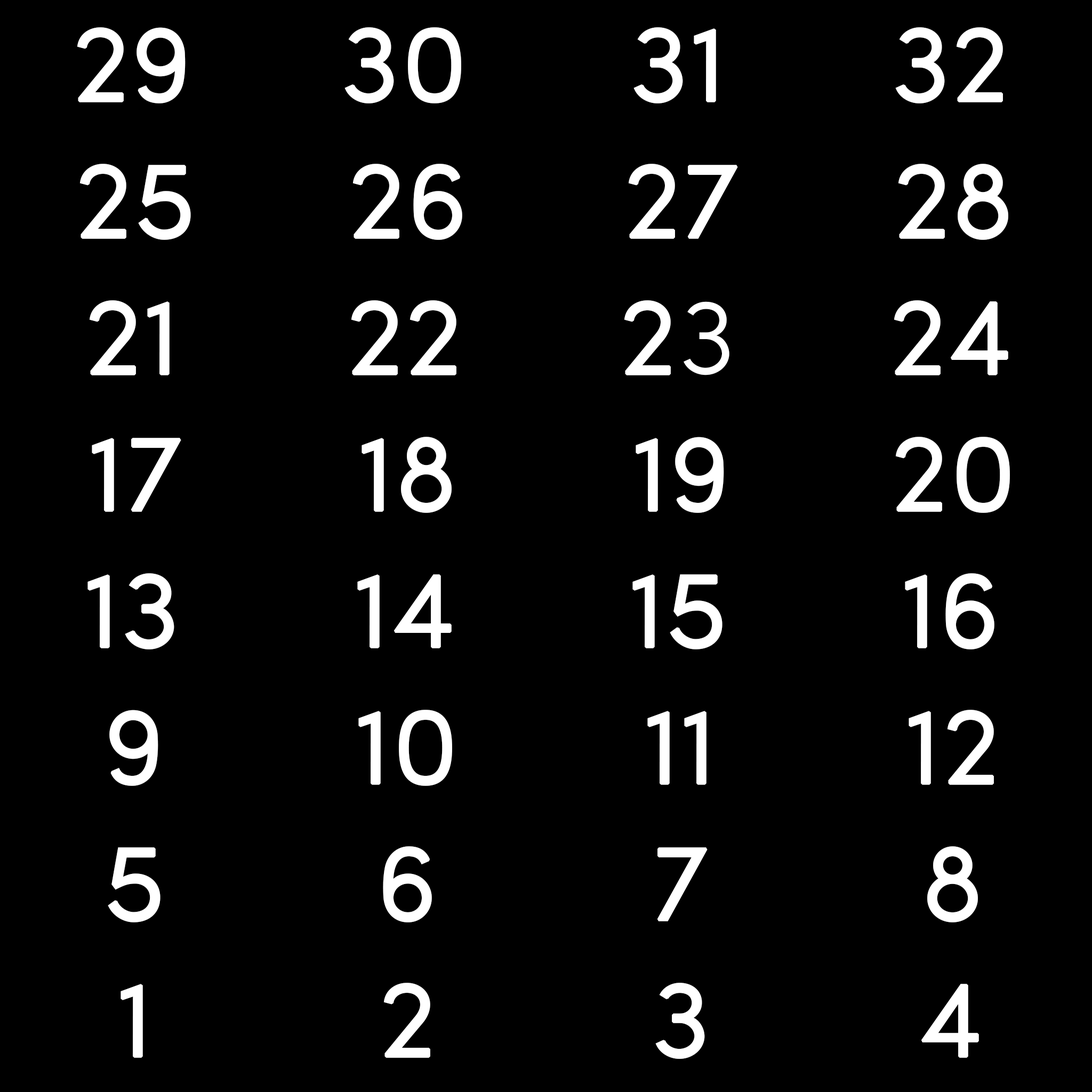
<style>
.page{position:relative;width:1092px;height:1092px;background:#000000}
.page>*{position:absolute;margin:0}
.t1{font:106.6px "SofiaProLight";color:#ffffff;font-weight:bold}
</style>
<div class="page">
<p class="t1" style="left:77px;top:27px;width:109px;height:76px">29</p>
<p class="t1" style="left:344px;top:27px;width:117px;height:76px">30</p>
<p class="t1" style="left:633px;top:27px;width:83px;height:76px">31</p>
<p class="t1" style="left:895px;top:27px;width:108px;height:76px">32</p>
<p class="t1" style="left:79px;top:164px;width:112px;height:76px">25</p>
<p class="t1" style="left:352px;top:164px;width:110px;height:76px">26</p>
<p class="t1" style="left:628px;top:164px;width:110px;height:75px">27</p>
<p class="t1" style="left:898px;top:164px;width:110px;height:76px">28</p>
<p class="t1" style="left:89px;top:300px;width:81px;height:75px">21</p>
<p class="t1" style="left:351px;top:300px;width:105px;height:75px">22</p>
<p class="t1" style="left:624px;top:300px;width:105px;height:75px">23</p>
<p class="t1" style="left:894px;top:300px;width:114px;height:75px">24</p>
<p class="t1" style="left:92px;top:438px;width:89px;height:74px">17</p>
<p class="t1" style="left:362px;top:437px;width:90px;height:76px">18</p>
<p class="t1" style="left:636px;top:437px;width:88px;height:76px">19</p>
<p class="t1" style="left:895px;top:437px;width:115px;height:76px">20</p>
<p class="t1" style="left:87px;top:573px;width:87px;height:76px">13</p>
<p class="t1" style="left:357px;top:574px;width:95px;height:74px">14</p>
<p class="t1" style="left:632px;top:574px;width:90px;height:75px">15</p>
<p class="t1" style="left:905px;top:573px;width:89px;height:76px">16</p>
<p class="t1" style="left:109px;top:710px;width:49px;height:76px">9</p>
<p class="t1" style="left:358px;top:710px;width:94px;height:76px">10</p>
<p class="t1" style="left:647px;top:711px;width:59px;height:74px">11</p>
<p class="t1" style="left:909px;top:710px;width:85px;height:75px">12</p>
<p class="t1" style="left:108px;top:847px;width:52px;height:75px">5</p>
<p class="t1" style="left:383px;top:846px;width:49px;height:76px">6</p>
<p class="t1" style="left:657px;top:847px;width:51px;height:74px">7</p>
<p class="t1" style="left:927px;top:846px;width:51px;height:76px">8</p>
<p class="t1" style="left:121px;top:984px;width:22px;height:74px">1</p>
<p class="t1" style="left:383px;top:983px;width:47px;height:75px">2</p>
<p class="t1" style="left:655px;top:983px;width:50px;height:76px">3</p>
<p class="t1" style="left:921px;top:984px;width:58px;height:74px">4</p>
</div>
